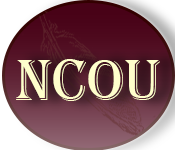
<style>
.page{position:relative;width:175px;height:150px}
.page>*{position:absolute;margin:0}
.t1{font:59.6px "Algerian";color:#ffffcc}
</style>
<div class="page">
<p class="t1" style="left:16px;top:59px;width:144px;height:42px">NCOU</p>
</div>
